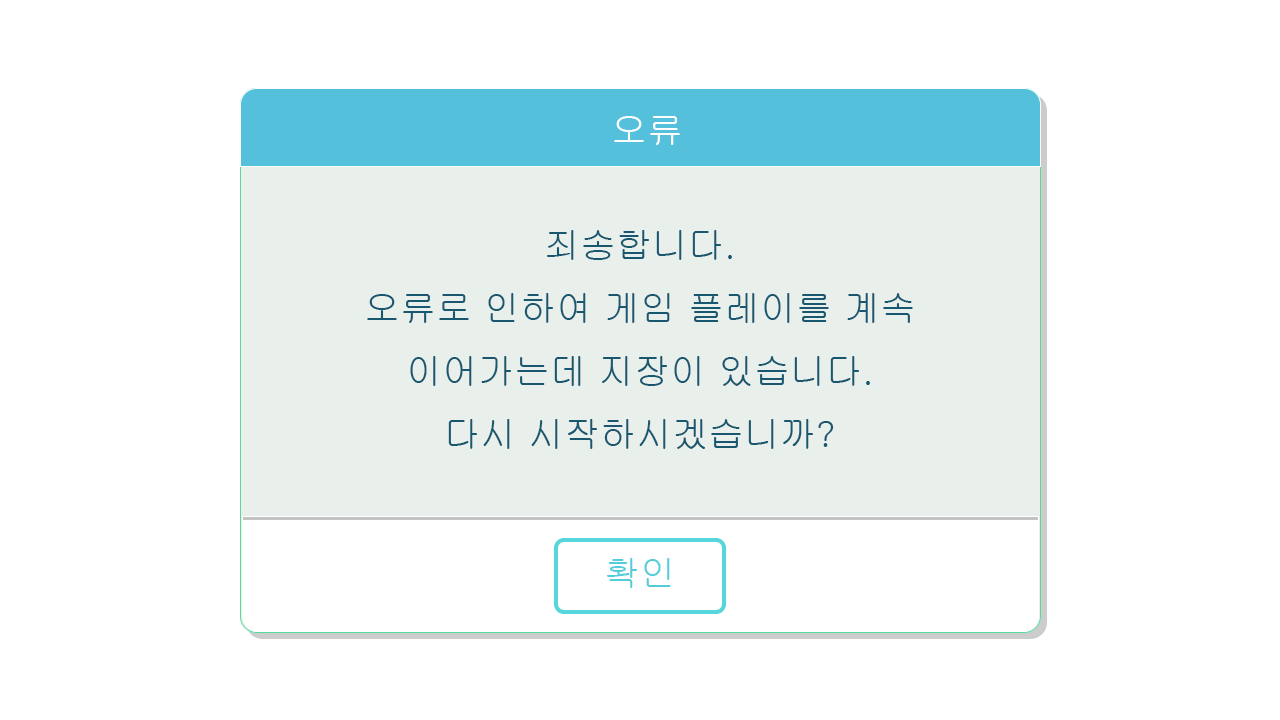
<style>
.page{position:relative;width:1280px;height:720px;background:#ffffff}
.page>*{position:absolute;margin:0}
.t1{font:36px "Gulim";color:#ffffff}
.t2{font:36px "Gulim";color:#195771}
.t3{font:36px "Gulim";color:#54cddb}
</style>
<div class="page">
<p class="t1" style="left:614px;top:116px;width:66px;height:29px">오류</p>
<p class="t2" style="left:367px;top:230px;width:546px;height:219px;text-align:center">죄송합니다.<br>오류로 인하여 게임 플레이를 계속 이어가는데 지장이 있습니다.<br>다시 시작하시겠습니까?</p>
<p class="t3" style="left:607px;top:558px;width:64px;height:30px">확인</p>
</div>
